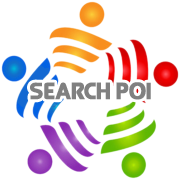
<style>
.page{position:relative;width:180px;height:180px;background:#ffffff}
.page>*{position:absolute;margin:0}
.t1{font:24px "Queen-of-Camelot";color:#808080;font-weight:bold;scale:0.97 1}
</style>
<div class="page">
<p class="t1" style="left:30px;top:82px;width:121px;height:18px">Search POI</p>
</div>
